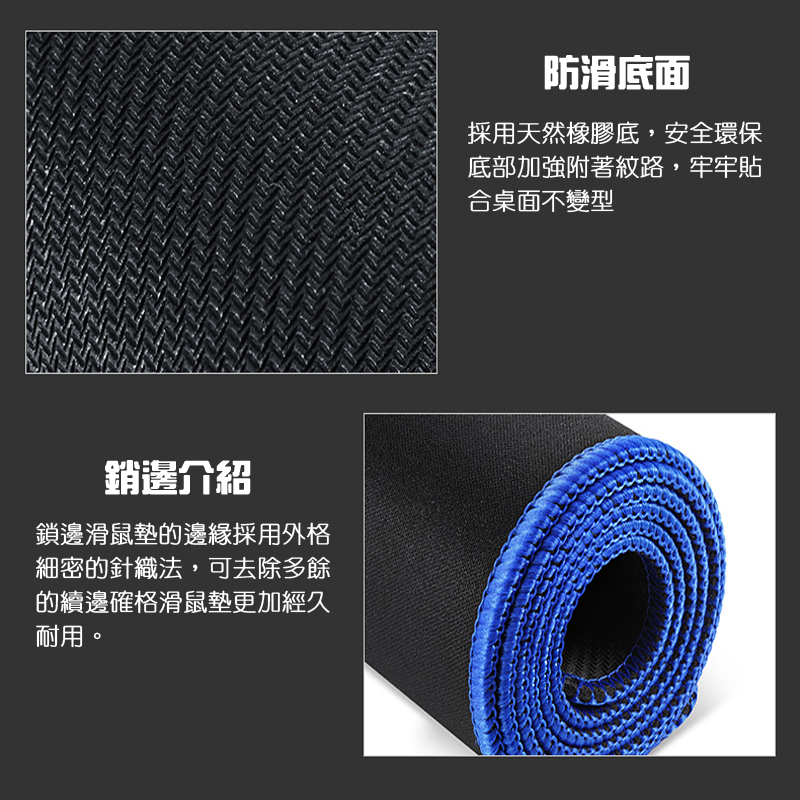
<style>
.page{position:relative;width:800px;height:800px;background:#333333}
.page>*{position:absolute;margin:0}
.t1{font:36px "HanWangZonYi";color:#ffffff;font-weight:bold}
.t2{font:24px "HanWangYenLight";color:#ffffff;font-weight:bold}
</style>
<div class="page">
<p class="t1" style="left:544px;top:55px;width:146px;height:35px">防滑底面</p>
<p class="t2" style="left:468px;top:121px;width:294px;height:92px">採用天然橡膠底，安全環保<br>底部加強附著紋路，牢牢貼<br>合桌面不變型</p>
<p class="t1" style="left:105px;top:460px;width:146px;height:35px">銷邊介紹</p>
<p class="t2" style="left:36px;top:522px;width:294px;height:126px">鎖邊滑鼠墊的邊緣採用外格<br>細密的針織法，可去除多餘<br>的續邊確格滑鼠墊更加經久<br>耐用。</p>
</div>
